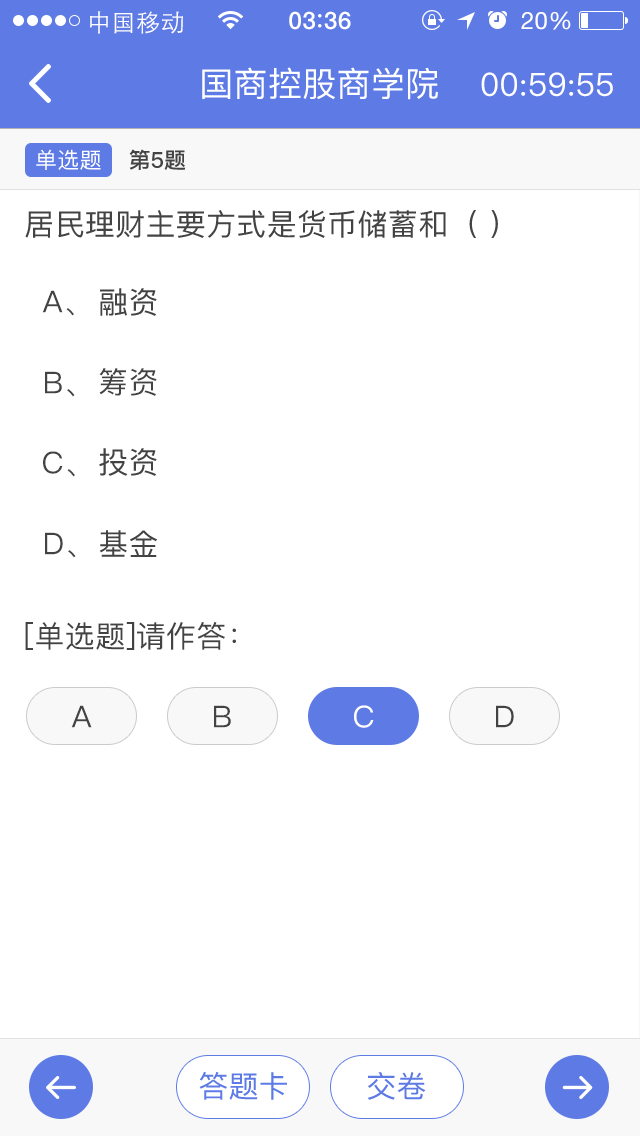
<style>
.page{position:relative;width:640px;height:1136px;background:#ffffff}
.page>*{position:absolute;margin:0}
.t1{font:24px "STHeitiSC-Light";letter-spacing:0.02em;color:#ffffff}
.t2{font:24px "HelveticaNeue-Medium";letter-spacing:0.03em;color:#ffffff}
.t3{font:24px "HelveticaNeue";letter-spacing:0.02em;color:#ffffff}
.t4{font:34px "PingFangSC-Regular";letter-spacing:0.01em;color:#ffffff}
.t5{font:32px "PingFangSC-Regular";letter-spacing:0.01em;color:#ffffff}
.t6{font:22px "PingFangSC-Regular";letter-spacing:0.01em;color:#ffffff}
.t7{font:22px "PingFangSC-Medium";letter-spacing:0.01em;color:#434343}
.t8{font:30px "PingFangSC-Regular";letter-spacing:0.01em;color:#434343}
.t9{font:30px "PingFangSC-Regular";letter-spacing:0.01em;color:#ffffff}
.t10{font:30px "PingFangSC-Regular";letter-spacing:0.01em;color:#5e7be5}
</style>
<div class="page">
<p class="t1" style="left:90px;top:11px;width:93px;height:23px">中国移动</p>
<p class="t2" style="left:289px;top:11px;width:62px;height:19px">03 36</p>
<p class="t3" style="left:521px;top:11px;width:50px;height:19px">20%</p>
<p class="t4" style="left:202px;top:67px;width:236px;height:33px">国商控股商学院</p>
<p class="t5" style="left:481px;top:72px;width:132px;height:25px">00:59:55</p>
<p class="t6" style="left:36px;top:149px;width:65px;height:21px">单选题</p>
<p class="t7" style="left:129px;top:149px;width:57px;height:21px">第5题</p>
<p class="t8" style="left:25px;top:210px;width:473px;height:28px">居民理财主要方式是货币储蓄和（ ）</p>
<p class="t8" style="left:42px;top:290px;width:32px;height:26px">A、</p>
<p class="t8" style="left:100px;top:288px;width:57px;height:28px">融资</p>
<p class="t8" style="left:45px;top:371px;width:30px;height:26px">B、</p>
<p class="t8" style="left:99px;top:368px;width:58px;height:28px">筹资</p>
<p class="t8" style="left:99px;top:448px;width:58px;height:28px">投资</p>
<p class="t8" style="left:43px;top:451px;width:32px;height:26px">C、</p>
<p class="t8" style="left:45px;top:532px;width:31px;height:26px">D、</p>
<p class="t8" style="left:99px;top:530px;width:58px;height:27px">基金</p>
<p class="t8" style="left:25px;top:622px;width:211px;height:28px">[单选题]请作答：</p>
<p class="t8" style="left:71px;top:705px;width:21px;height:23px">A</p>
<p class="t8" style="left:214px;top:705px;width:17px;height:23px">B</p>
<p class="t9" style="left:354px;top:705px;width:20px;height:23px">C</p>
<p class="t8" style="left:496px;top:705px;width:18px;height:23px">D</p>
<p class="t10" style="left:199px;top:1072px;width:88px;height:28px">答题卡</p>
<p class="t10" style="left:367px;top:1072px;width:59px;height:28px">交卷</p>
</div>
